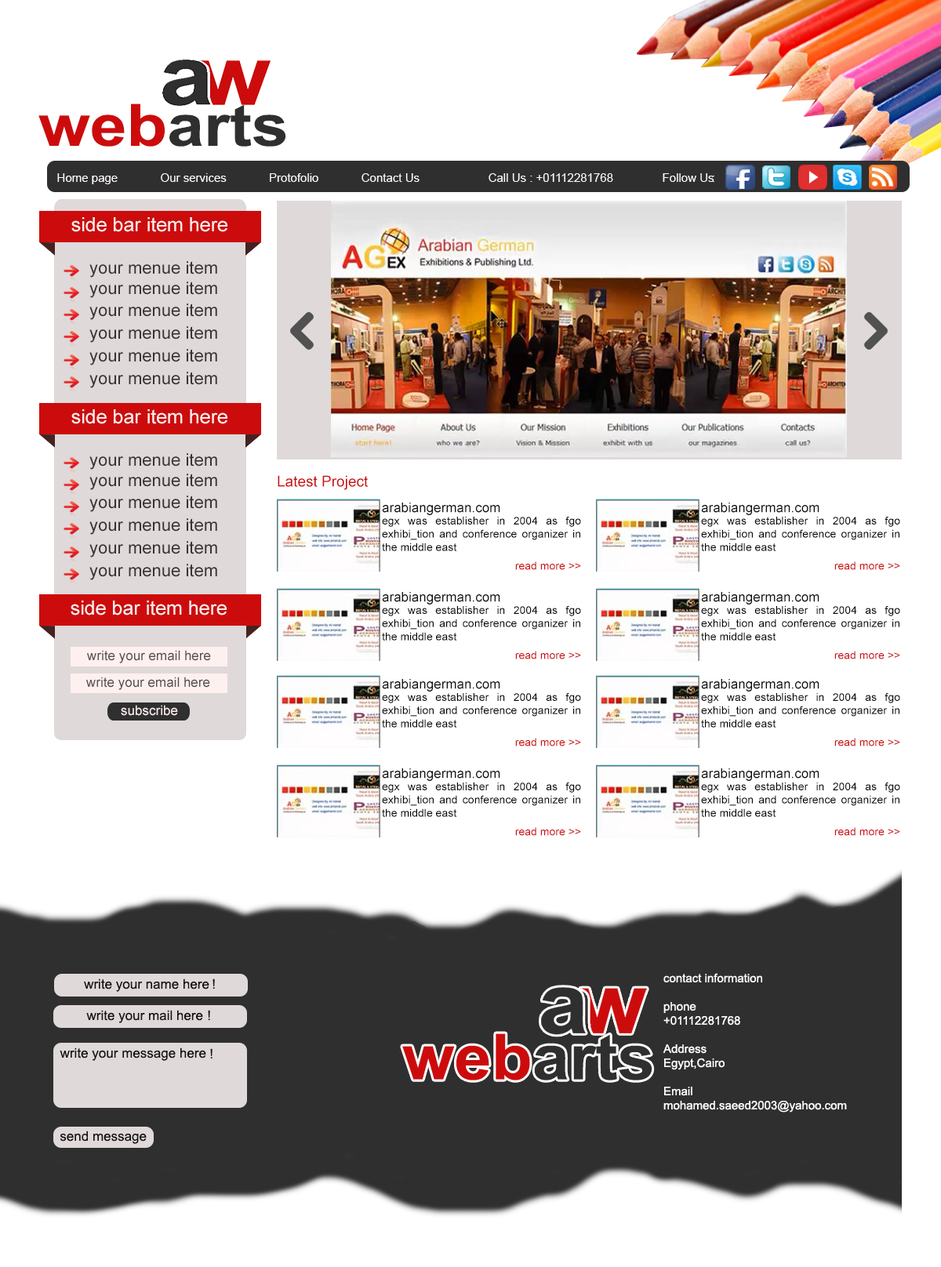
<style>
.page{position:relative;width:941px;height:1267px;background:#ffffff}
.page>*{position:absolute;margin:0}
.t1{font:58.2px "Arial-BoldMT";color:#302f2f;scale:1.14 1}
.t2{font:58.2px "Arial-BoldMT";color:#cc0c0c;scale:1.14 1}
.t3{font:11.8px "ArialMT";color:#fff9f9}
.t4{font:19.6px "ArialMT";color:#fbeded}
.t5{font:17.3px "ArialMT";color:#383535}
.t6{font:14.9px "ArialMT";color:#cc0c0c}
.t7{font:13.3px "ArialMT";color:#121212}
.t8{font:11px "ArialMT";color:#050505}
.t9{font:11px "ArialMT";color:#cc0c0c}
.t10{font:13.3px "ArialMT";color:#544f4f}
.t11{font:13.3px "ArialMT";color:#fbeded}
.t12{font:11.8px "ArialMT";color:#ffffff}
.t13{font:13.3px "ArialMT";color:#131111}
.t14{font:63.5px "Arial-BoldMT";color:#302f2f;scale:1.05 1}
.t15{font:63.5px "Arial-BoldMT";color:#cc0c0c;scale:1.05 1}
</style>
<div class="page">
<p class="t1" style="left:38px;top:104px;width:248px;height:43px"><span class="t2">web</span>arts</p>
<p class="t3" style="left:35px;top:173px;width:679px;height:11px">Home page             Our services             Protofolio             Contact Us                     Call Us : +01112281768               Follow Us      :</p>
<p class="t3" style="left:713px;top:176px;width:1px;height:6px">:</p>
<p class="t4" style="left:71px;top:217px;width:156px;height:15px">side bar item here</p>
<p class="t5" style="left:89px;top:261px;width:128px;height:17px">your menue item</p>
<p class="t5" style="left:89px;top:282px;width:128px;height:16px">your menue item</p>
<p class="t5" style="left:89px;top:303px;width:128px;height:17px">your menue item</p>
<p class="t5" style="left:89px;top:326px;width:128px;height:17px">your menue item</p>
<p class="t5" style="left:89px;top:349px;width:128px;height:16px">your menue item</p>
<p class="t5" style="left:89px;top:372px;width:128px;height:16px">your menue item</p>
<p class="t4" style="left:71px;top:409px;width:156px;height:15px">side bar item here</p>
<p class="t5" style="left:89px;top:453px;width:128px;height:17px">your menue item</p>
<p class="t5" style="left:89px;top:474px;width:128px;height:16px">your menue item</p>
<p class="t6" style="left:278px;top:475px;width:90px;height:15px">Latest Project</p>
<p class="t5" style="left:89px;top:496px;width:128px;height:16px">your menue item</p>
<p class="t7" style="left:382px;top:503px;width:118px;height:12px">arabiangerman.com</p>
<p class="t7" style="left:701px;top:503px;width:118px;height:12px">arabiangerman.com</p>
<p class="t5" style="left:89px;top:518px;width:128px;height:17px">your menue item</p>
<p class="t8" style="left:382px;top:517px;width:199px;height:34px;text-align:justify">egx was establisher in 2004 as fgo exhibi_tion and conference organizer in the middle east</p>
<p class="t8" style="left:701px;top:517px;width:199px;height:34px;text-align:justify">egx was establisher in 2004 as fgo exhibi_tion and conference organizer in the middle east</p>
<p class="t5" style="left:89px;top:541px;width:128px;height:17px">your menue item</p>
<p class="t5" style="left:89px;top:564px;width:128px;height:16px">your menue item</p>
<p class="t9" style="left:515px;top:561px;width:66px;height:9px">&lt;&lt; read more</p>
<p class="t9" style="left:834px;top:561px;width:66px;height:9px">&lt;&lt; read more</p>
<p class="t7" style="left:382px;top:592px;width:118px;height:13px">arabiangerman.com</p>
<p class="t7" style="left:701px;top:592px;width:118px;height:13px">arabiangerman.com</p>
<p class="t4" style="left:71px;top:601px;width:156px;height:15px">side bar item here</p>
<p class="t8" style="left:382px;top:606px;width:199px;height:35px;text-align:justify">egx was establisher in 2004 as fgo exhibi_tion and conference organizer in the middle east</p>
<p class="t8" style="left:701px;top:606px;width:199px;height:35px;text-align:justify">egx was establisher in 2004 as fgo exhibi_tion and conference organizer in the middle east</p>
<p class="t10" style="left:87px;top:650px;width:124px;height:13px">write your email here</p>
<p class="t9" style="left:515px;top:651px;width:66px;height:8px">&lt;&lt; read more</p>
<p class="t9" style="left:834px;top:651px;width:66px;height:8px">&lt;&lt; read more</p>
<p class="t10" style="left:86px;top:677px;width:124px;height:13px">write your email here</p>
<p class="t7" style="left:382px;top:679px;width:118px;height:13px">arabiangerman.com</p>
<p class="t7" style="left:701px;top:679px;width:118px;height:13px">arabiangerman.com</p>
<p class="t8" style="left:382px;top:693px;width:199px;height:35px;text-align:justify">egx was establisher in 2004 as fgo exhibi_tion and conference organizer in the middle east</p>
<p class="t8" style="left:701px;top:693px;width:199px;height:35px;text-align:justify">egx was establisher in 2004 as fgo exhibi_tion and conference organizer in the middle east</p>
<p class="t11" style="left:121px;top:705px;width:57px;height:11px">subscribe</p>
<p class="t9" style="left:515px;top:738px;width:66px;height:9px">&lt;&lt; read more</p>
<p class="t9" style="left:834px;top:738px;width:66px;height:9px">&lt;&lt; read more</p>
<p class="t7" style="left:382px;top:768px;width:118px;height:13px">arabiangerman.com</p>
<p class="t7" style="left:701px;top:768px;width:118px;height:13px">arabiangerman.com</p>
<p class="t8" style="left:382px;top:783px;width:199px;height:34px;text-align:justify">egx was establisher in 2004 as fgo exhibi_tion and conference organizer in the middle east</p>
<p class="t8" style="left:701px;top:783px;width:199px;height:34px;text-align:justify">egx was establisher in 2004 as fgo exhibi_tion and conference organizer in the middle east</p>
<p class="t9" style="left:515px;top:827px;width:66px;height:9px">&lt;&lt; read more</p>
<p class="t9" style="left:834px;top:827px;width:66px;height:9px">&lt;&lt; read more</p>
<p class="t12" style="left:663px;top:973px;width:184px;height:140px;text-align:justify">contact information<br><br>phone<br>+01112281768<br><br>Address<br>Egypt,Cairo<br><br>Email<br>mohamed.saeed2003@yahoo.com</p>
<p class="t13" style="left:84px;top:979px;width:125px;height:13px">write your name here</p>
<p class="t13" style="left:213px;top:979px;width:2px;height:10px">!</p>
<p class="t13" style="left:86px;top:1010px;width:117px;height:13px">write your mail here</p>
<p class="t13" style="left:208px;top:1010px;width:2px;height:10px">!</p>
<p class="t14" style="left:402px;top:1034px;width:250px;height:47px"><span class="t15">web</span>arts</p>
<p class="t13" style="left:60px;top:1048px;width:146px;height:13px">write your message here</p>
<p class="t13" style="left:210px;top:1048px;width:3px;height:11px">!</p>
<p class="t13" style="left:60px;top:1131px;width:87px;height:13px">send message</p>
</div>
